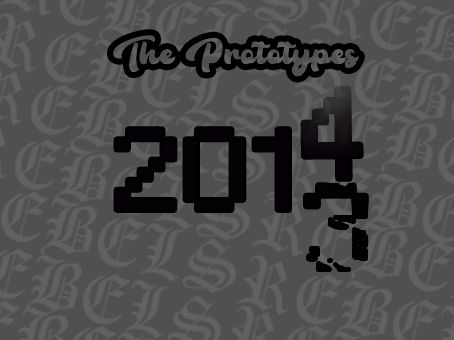
<style>
.page{position:relative;width:454px;height:340px;background:#515051}
.page>*{position:absolute;margin:0}
.t1{font:32px "TheBambankScript";color:#515051}
.t2{font:107.8px "Small Fonts";color:#050005;scale:1.37 1}
.t3{font:113px "Small Fonts";color:#050005;scale:1.36 1}
</style>
<div class="page">
<p class="t1" style="left:113px;top:35px;width:246px;height:42px">The Prototypes</p>
<p class="t1" style="left:113px;top:35px;width:246px;height:42px">The Prototypes</p>
<p class="t1" style="left:113px;top:35px;width:246px;height:42px">The Prototypes</p>
<p class="t1" style="left:113px;top:35px;width:246px;height:42px">The Prototypes</p>
<p class="t2" style="left:116px;top:129px;width:173px;height:81px">201</p>
<p class="t2" style="left:116px;top:129px;width:173px;height:81px">201</p>
<p class="t3" style="left:306px;top:185px;width:60px;height:85px">3</p>
<p class="t3" style="left:306px;top:185px;width:60px;height:85px">3</p>
</div>
